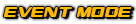
<style>
.page{position:relative;width:136px;height:24px;background:#ffffff}
.page>*{position:absolute;margin:0}
.t1{font:14.4px "2051PLASTIC-ALP53";letter-spacing:0.1em;color:#ffba00;scale:0.83 1}
</style>
<div class="page">
<p class="t1" style="left:4px;top:7px;width:128px;height:10px">EVENT MODE</p>
</div>
